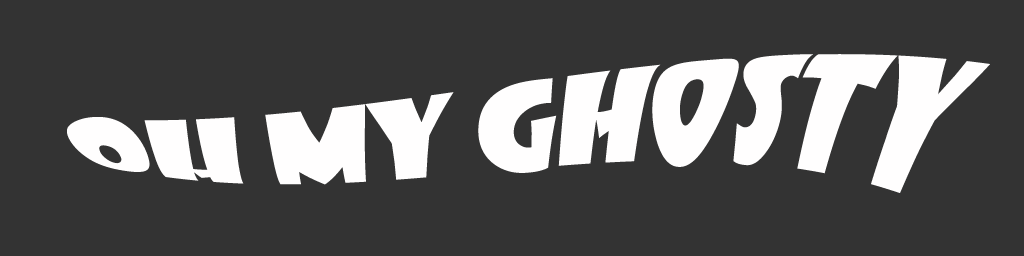
<style>
.page{position:relative;width:1024px;height:256px;background:#333333}
.page>*{position:absolute;margin:0}
.t1{font:120px "ShowcardGothic-Reg";color:#fffefe}
</style>
<div class="page">
<p class="t1" style="left:67px;top:54px;width:923px;height:139px">OH MY GHOSTY</p>
</div>
